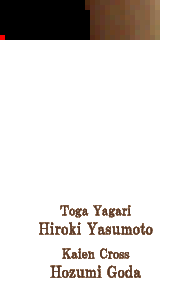
<style>
.page{position:relative;width:192px;height:296px;background:#ffffff}
.page>*{position:absolute;margin:0}
.t1{font:16px "HGPMinchoB";color:#583828}
.t2{font:13.3px "HGPMinchoB";color:#583828}
.t3{font:13.3px/24px "HGPMinchoB";color:#583828}
</style>
<div class="page">
<p class="t1" style="left:39px;top:205px;width:114px;height:73px;text-align:center"><span class="t2">Toga Yagari<br></span>Hiroki Yasumoto<br><span class="t3">Kaien Cross<br></span>Hozumi Goda</p>
</div>
